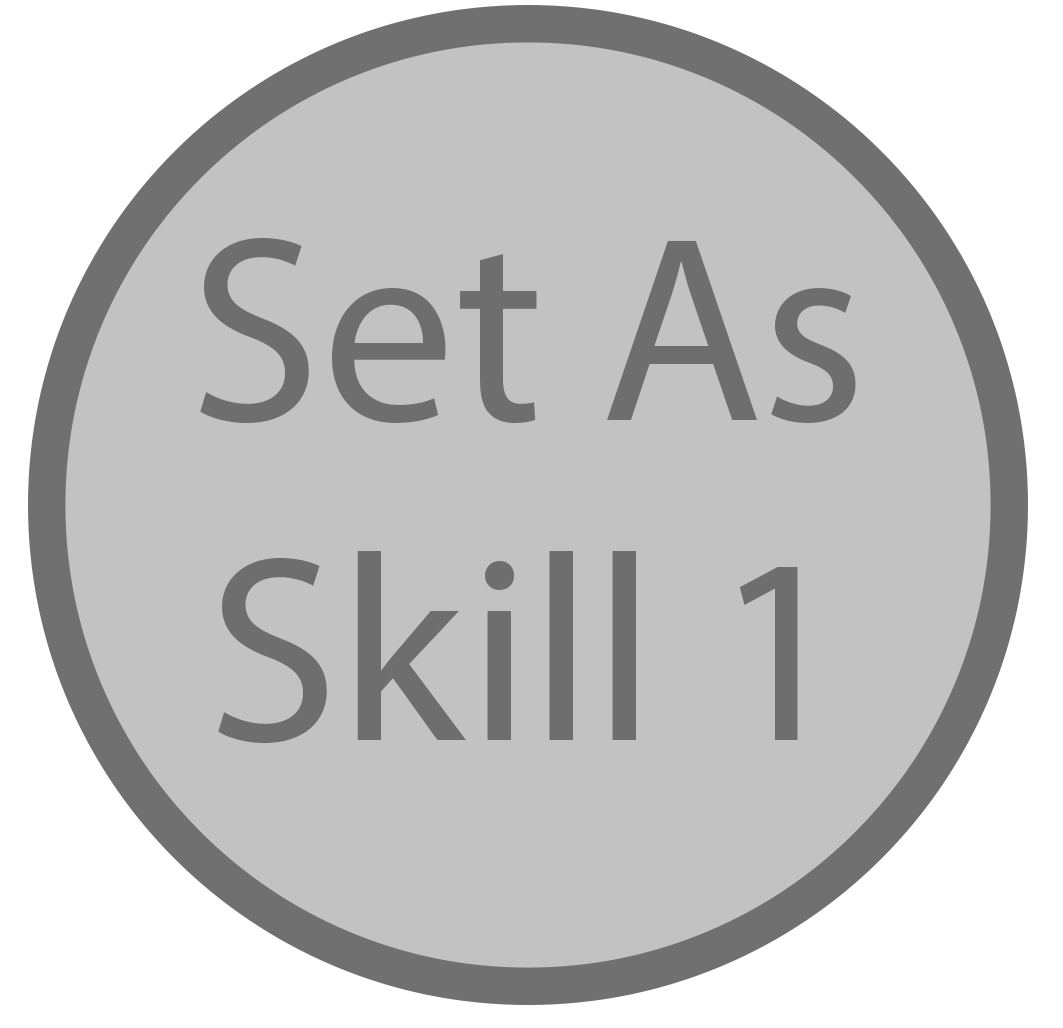
<style>
.page{position:relative;width:1063px;height:1028px;background:#c2c2c2}
.page>*{position:absolute;margin:0}
.t1{font:266.2px "MyriadPro-Regular";color:#6e6e6e}
</style>
<div class="page">
<p class="t1" style="left:200px;top:237px;width:656px;height:507px;text-align:center">Set As<br>Skill 1</p>
</div>
